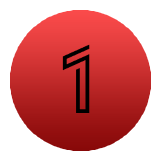
<style>
.page{position:relative;width:161px;height:161px;background:#ffffff}
.page>*{position:absolute;margin:0}
.t1{font:90px "LIBRARY3AM";color:#000000}
</style>
<div class="page">
<p class="t1" style="left:62px;top:44px;width:28px;height:69px">1</p>
</div>
